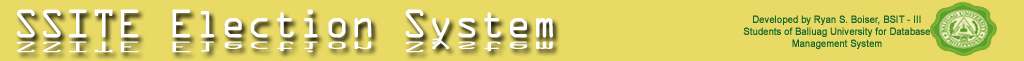
<style>
.page{position:relative;width:1024px;height:61px;background:#e8da65}
.page>*{position:absolute;margin:0}
.t1{font:36px "OCRAStd";color:#ffffff}
.t2{font:10px "ArialMT";color:#14652b;font-weight:bold;scale:0.91 1}
.t3{font:13.7px "OCRAStd";color:#ffffff;scale:2.62 1}
</style>
<div class="page">
<p class="t1" style="left:17px;top:9px;width:536px;height:36px">SSITE Election System</p>
<p class="t2" style="left:743px;top:15px;width:187px;height:34px;text-align:center">Developed by Ryan S. Boiser, BSIT - III Students of Baliuag University for Database Management System</p>
<p class="t3" style="left:17px;top:38px;width:536px;height:15px">SSITE Election System</p>
</div>
